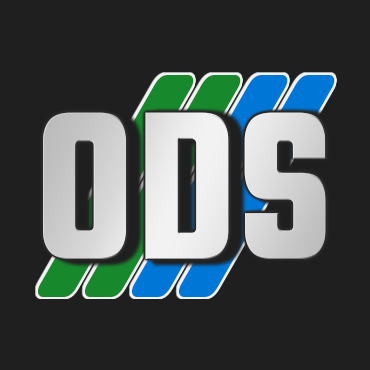
<style>
.page{position:relative;width:370px;height:370px;background:#1f1f1f}
.page>*{position:absolute;margin:0}
.t1{font:228px "Teko-Bold";letter-spacing:0.01em;font-weight:bold;scale:0.83 1}
</style>
<div class="page">
<p class="t1" style="left:43px;top:112px;width:284px;height:147px">ODS</p>
</div>
